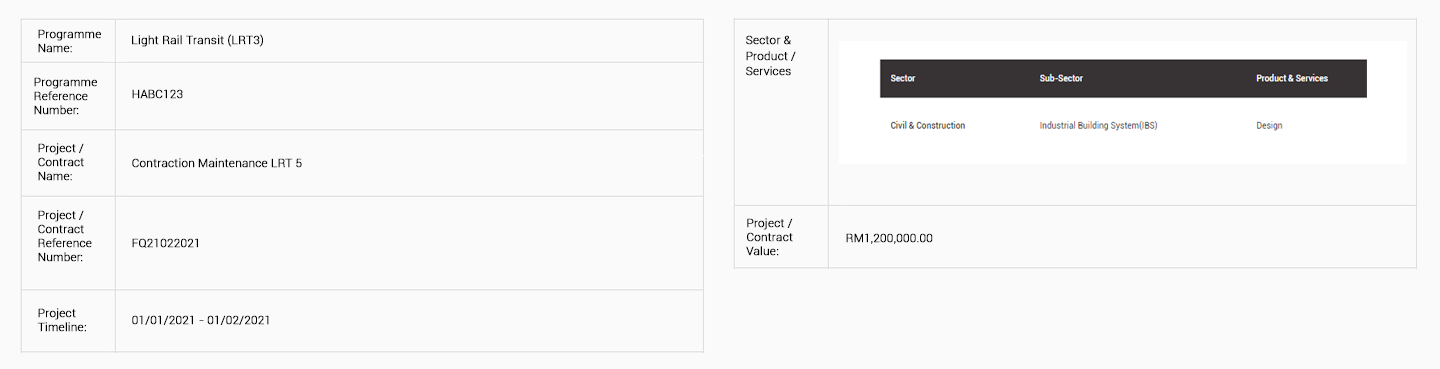
<style>
.page{position:relative;width:1440px;height:369px;background:#fafafa}
.page>*{position:absolute;margin:0}
.t1{font:11.6px/13.9px "Roboto-Light";color:#000000;font-weight:bold}
.t2{font:11.8px "Roboto-Light";color:#000000;font-weight:bold}
.t3{font:11.6px/15.4px "Roboto-Light";color:#000000;font-weight:bold}
.t4{font:11.6px "Roboto-Light";color:#000000;font-weight:bold}
</style>
<div class="page">
<p class="t1" style="left:38px;top:29px;width:63px;height:24px">Programme<br>Name:</p>
<p class="t2" style="left:132px;top:34px;width:131px;height:13px">Light Rail Transit (LRT3)</p>
<p class="t3" style="left:746px;top:35px;width:50px;height:41px">Sector &amp;<br>Product /<br>Services</p>
<p class="t1" style="left:34px;top:77px;width:63px;height:38px">Programme<br>Reference<br>Number:</p>
<p class="t4" style="left:132px;top:89px;width:51px;height:10px">HABC123</p>
<p class="t1" style="left:38px;top:143px;width:46px;height:38px">Project /<br>Contract<br>Name:</p>
<p class="t4" style="left:132px;top:158px;width:170px;height:10px">Contraction Maintenance LRT 5</p>
<p class="t1" style="left:38px;top:210px;width:54px;height:52px">Project /<br>Contract<br>Reference<br>Number:</p>
<p class="t1" style="left:746px;top:218px;width:47px;height:38px">Project /<br>Contract<br>Value:</p>
<p class="t4" style="left:846px;top:233px;width:87px;height:11px">RM1,200,000.00</p>
<p class="t4" style="left:132px;top:238px;width:66px;height:10px">FQ21022021</p>
<p class="t1" style="left:37px;top:308px;width:49px;height:24px">Project<br>Timeline:</p>
<p class="t4" style="left:132px;top:315px;width:137px;height:10px">01/01/2021 - 01/02/2021</p>
</div>
